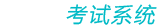
<style>
.page{position:relative;width:166px;height:27px;background:#ffffff}
.page>*{position:absolute;margin:0}
.t1{font:21px "MicrosoftYaHeiUI";letter-spacing:0.08em;color:#00bac6;font-style:italic}
</style>
<div class="page">
<p class="t1" style="left:66px;top:4px;width:91px;height:21px">考试系统</p>
</div>
